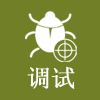
<style>
.page{position:relative;width:100px;height:100px;background:#717f27}
.page>*{position:absolute;margin:0}
.t1{font:24px "NSimSun";color:#ffffff;font-weight:bold}
</style>
<div class="page">
<p class="t1" style="left:27px;top:66px;width:48px;height:23px">调试</p>
</div>
